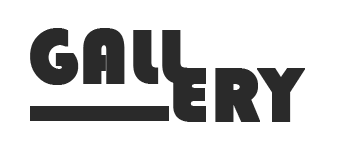
<style>
.page{position:relative;width:350px;height:150px;background:#ffffff}
.page>*{position:absolute;margin:0}
.t1{font:80px "Bauhaus93";color:#2a2a2a;font-weight:bold}
</style>
<div class="page">
<p class="t1" style="left:30px;top:28px;width:158px;height:57px">GALL</p>
<p class="t1" style="left:173px;top:68px;width:132px;height:54px">ERY</p>
</div>
